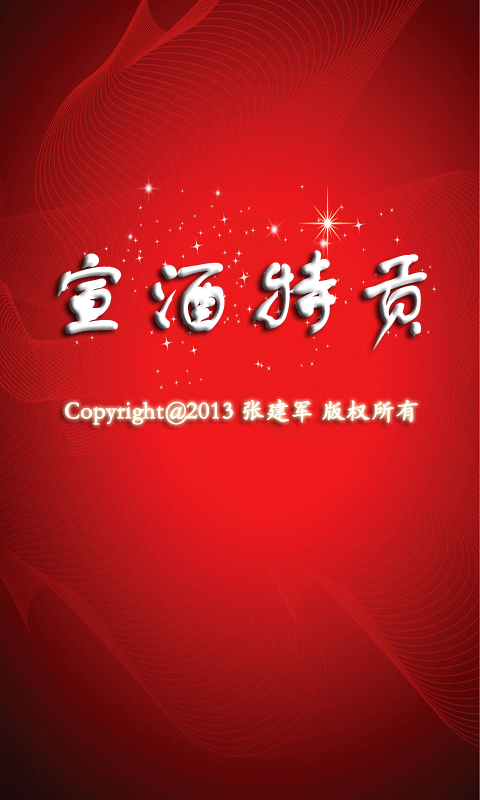
<style>
.page{position:relative;width:480px;height:800px}
.page>*{position:absolute;margin:0}
.t1{font:100px "FZSTK--GBK1-0";color:#ffffff;font-weight:bold}
.t2{font:24px "STKaiti";color:#ffffff;font-weight:bold}
</style>
<div class="page">
<p class="t1" style="left:58px;top:250px;width:369px;height:101px">宣酒特贡</p>
<p class="t2" style="left:65px;top:399px;width:353px;height:26px">Copyright@2013 张建军 版权所有</p>
</div>
